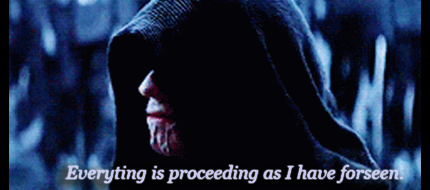
<style>
.page{position:relative;width:430px;height:190px;background:#040307}
.page>*{position:absolute;margin:0}
.t1{font:18px "Georgia-Italic";color:#c8c8fa}
</style>
<div class="page">
<p class="t1" style="left:65px;top:165px;width:338px;height:18px">Everyting is proceeding as I have forseen.</p>
</div>
